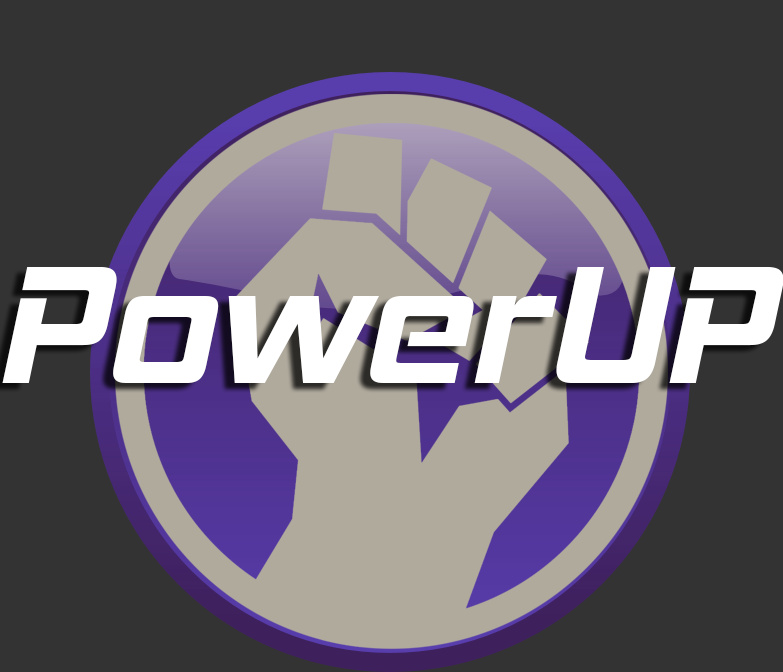
<style>
.page{position:relative;width:783px;height:672px;background:#333333}
.page>*{position:absolute;margin:0}
.t1{font:171.6px "HemiHeadRg-BoldItalic";color:#ffffff}
</style>
<div class="page">
<p class="t1" style="left:2px;top:267px;width:782px;height:116px">PowerUP</p>
</div>
